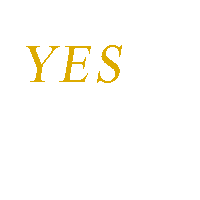
<style>
.page{position:relative;width:200px;height:200px;background:#ffffff}
.page>*{position:absolute;margin:0}
.t1{font:55.2px "TimesNewRomanPSMT";letter-spacing:0.1em;color:#ddab00;font-style:italic;scale:0.87 1}
</style>
<div class="page">
<p class="t1" style="left:26px;top:45px;width:96px;height:38px">YES</p>
</div>
